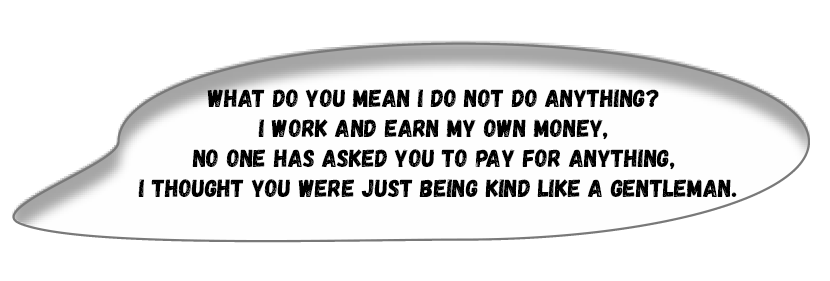
<style>
.page{position:relative;width:830px;height:281px;background:#ffffff}
.page>*{position:absolute;margin:0}
.t1{font:25px "Gagalin-Regular";color:#000000}
</style>
<div class="page">
<p class="t1" style="left:138px;top:89px;width:599px;height:108px;text-align:center">What do you mean I do not do anything? <br>I work and earn my own money, <br>no one has asked you to pay for anything, <br>I thought you were just being kind like a gentleman.</p>
</div>
